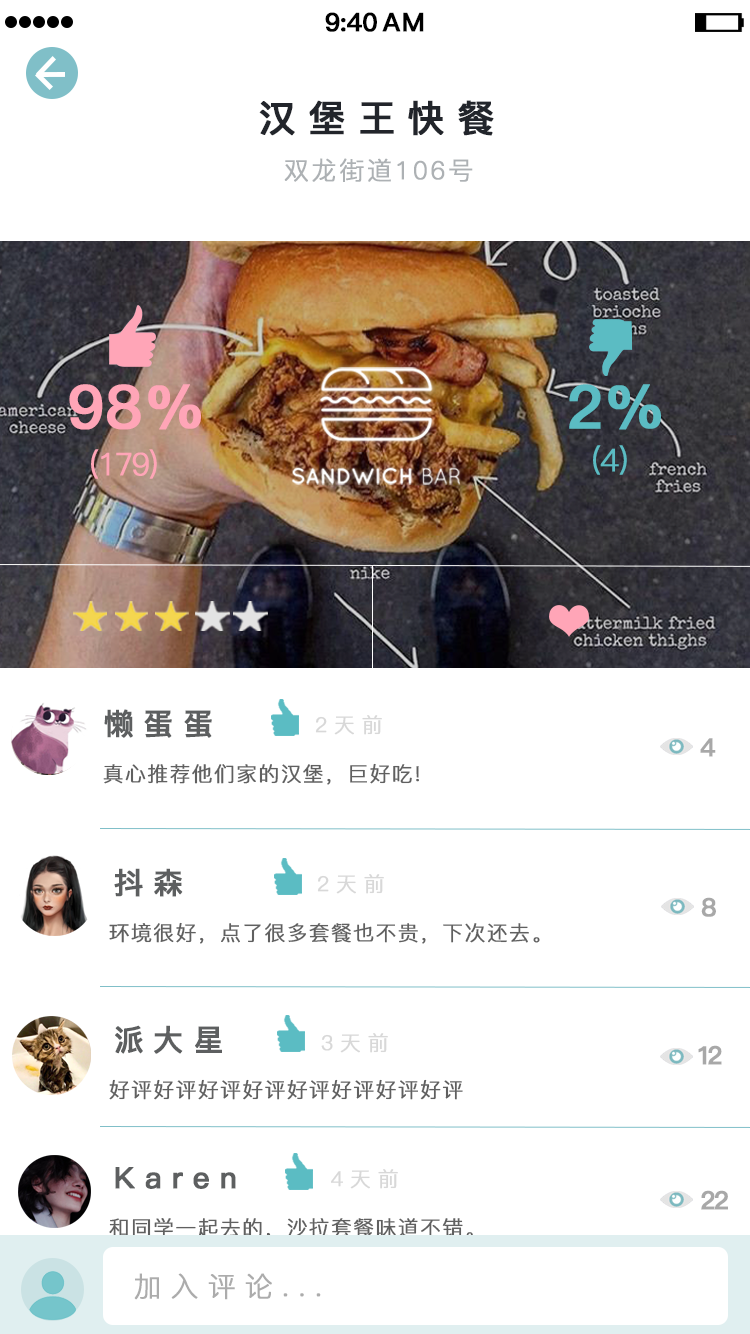
<style>
.page{position:relative;width:750px;height:1334px;background:#ffffff}
.page>*{position:absolute;margin:0}
.t1{font:25.4px "PingFang-SC-Bold";letter-spacing:-0.028em;color:#000000;font-weight:bold}
.t2{font:25.4px "PingFang-SC-Bold";letter-spacing:0.052em;color:#000000;font-weight:bold}
.t3{font:37px "PingFang-SC-Bold";letter-spacing:0.314em;color:#22252b;font-weight:bold}
.t4{font:25px "PingFang-SC-Regular";letter-spacing:0.085em;color:#adb2b4;font-weight:bold}
.t5{font:60px "PingFang-SC-Bold";letter-spacing:0.012em;color:#ffa5b7;font-weight:bold}
.t6{font:60px "PingFang-SC-Bold";letter-spacing:0.012em;color:#5bbcc3;font-weight:bold}
.t7{font:31px "PingFang-SC-Regular";letter-spacing:-0.088em;color:#ffa5b7;font-weight:bold}
.t8{font:31px "PingFang-SC-Regular";letter-spacing:-0.068em;color:#5bbcc3;font-weight:bold}
.t9{font:29.6px "PingFang-SC-Bold";letter-spacing:0.314em;color:#5d5f60;font-weight:bold}
.t10{font:20.6px "PingFang-SC-Regular";letter-spacing:0.314em;color:#d8d8d8;font-weight:bold}
.t11{font:25px "PingFang-SC-Bold";letter-spacing:0.212em;color:#a8a8a8;font-weight:bold}
.t12{font:20.6px "PingFang-SC-Regular";letter-spacing:0.054em;color:#606060;font-weight:bold}
.t13{font:25px "PingFang-SC-Bold";letter-spacing:-0.188em;color:#a8a8a8;font-weight:bold}
.t14{font:25px "PingFang-SC-Bold";letter-spacing:-0.088em;color:#a8a8a8;font-weight:bold}
.t15{font:27.6px "PingFang-SC-Regular";letter-spacing:0.314em;color:#acacac;font-weight:bold}
</style>
<div class="page">
<p class="t1" style="left:325px;top:12px;width:52px;height:20px">9:40</p>
<p class="t2" style="left:382px;top:12px;width:42px;height:20px">AM</p>
<p class="t3" style="left:259px;top:100px;width:235px;height:36px">汉堡王快餐</p>
<p class="t4" style="left:284px;top:158px;width:189px;height:24px">双龙街道106号</p>
<p class="t5" style="left:69px;top:384px;width:132px;height:46px">98%</p>
<p class="t6" style="left:569px;top:384px;width:92px;height:46px">2%</p>
<p class="t7" style="left:91px;top:449px;width:66px;height:30px">(179)</p>
<p class="t8" style="left:593px;top:445px;width:34px;height:30px">(4)</p>
<p class="t9" style="left:104px;top:709px;width:108px;height:29px">懒蛋蛋</p>
<p class="t10" style="left:315px;top:715px;width:67px;height:20px">2天前</p>
<p class="t11" style="left:700px;top:738px;width:16px;height:19px">4</p>
<p class="t12" style="left:103px;top:763px;width:316px;height:22px">真心推荐他们家的汉堡，巨好吃!</p>
<p class="t9" style="left:114px;top:868px;width:69px;height:29px">抖森</p>
<p class="t10" style="left:317px;top:874px;width:67px;height:20px">2天前</p>
<p class="t11" style="left:701px;top:897px;width:15px;height:20px">8</p>
<p class="t12" style="left:109px;top:922px;width:431px;height:22px">环境很好，点了很多套餐也不贵，下次还去。</p>
<p class="t9" style="left:115px;top:1025px;width:107px;height:29px">派大星</p>
<p class="t10" style="left:321px;top:1033px;width:67px;height:20px">3天前</p>
<p class="t13" style="left:698px;top:1045px;width:24px;height:20px">12</p>
<p class="t12" style="left:109px;top:1079px;width:354px;height:21px">好评好评好评好评好评好评好评好评</p>
<p class="t9" style="left:115px;top:1167px;width:121px;height:22px">Karen</p>
<p class="t10" style="left:331px;top:1169px;width:67px;height:20px">4天前</p>
<p class="t14" style="left:701px;top:1190px;width:27px;height:20px">22</p>
<p class="t12" style="left:109px;top:1218px;width:364px;height:21px">和同学一起去的，沙拉套餐味道不错。</p>
<p class="t15" style="left:134px;top:1273px;width:187px;height:27px">加入评论...</p>
</div>
